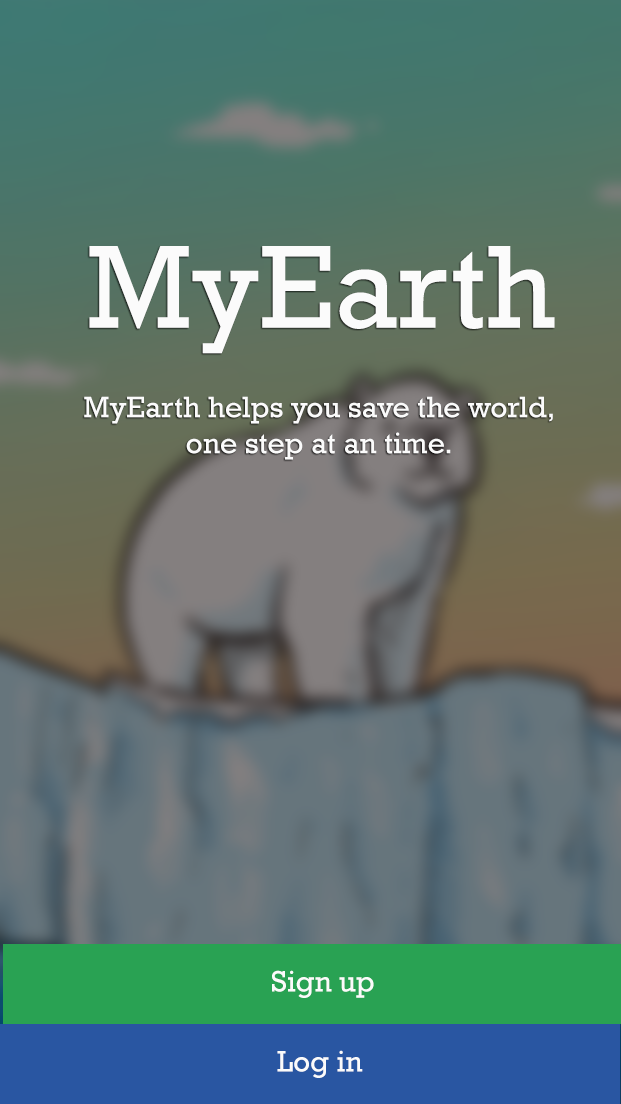
<style>
.page{position:relative;width:621px;height:1104px}
.page>*{position:absolute;margin:0}
.t1{font:120px "Rockwell";color:#fbfbfb}
.t2{font:30px "Rockwell";color:#fbfbfb}
</style>
<div class="page">
<p class="t1" style="left:89px;top:246px;width:466px;height:108px">MyEarth</p>
<p class="t2" style="left:84px;top:396px;width:469px;height:64px;text-align:center">MyEarth helps you save the world,<br>one step at an time.</p>
<p class="t2" style="left:272px;top:970px;width:102px;height:28px">Sign up</p>
<p class="t2" style="left:277px;top:1050px;width:86px;height:28px">Log in</p>
</div>
